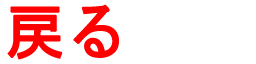
<style>
.page{position:relative;width:256px;height:64px;background:#ffffff}
.page>*{position:absolute;margin:0}
.t1{font:60px "MS-Gothic";color:#ff0000;font-weight:bold}
</style>
<div class="page">
<p class="t1" style="left:7px;top:4px;width:112px;height:56px">戻る</p>
</div>
